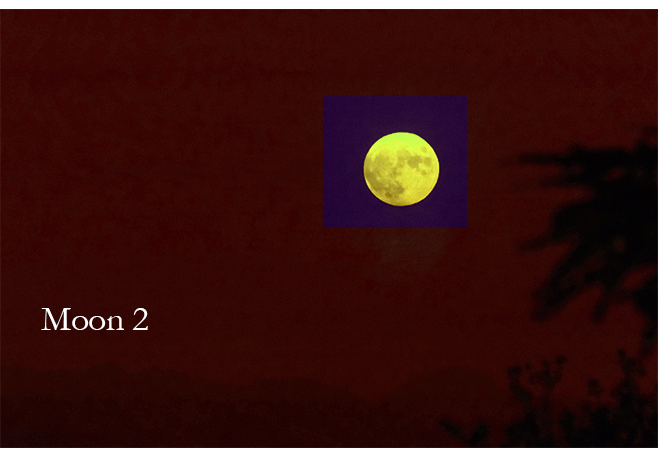
<style>
.page{position:relative;width:658px;height:457px}
.page>*{position:absolute;margin:0}
.t1{font:36px "Garamond";letter-spacing:-0.02em;color:#ffffff}
</style>
<div class="page">
<p class="t1" style="left:41px;top:308px;width:107px;height:22px">Moon 2</p>
</div>
